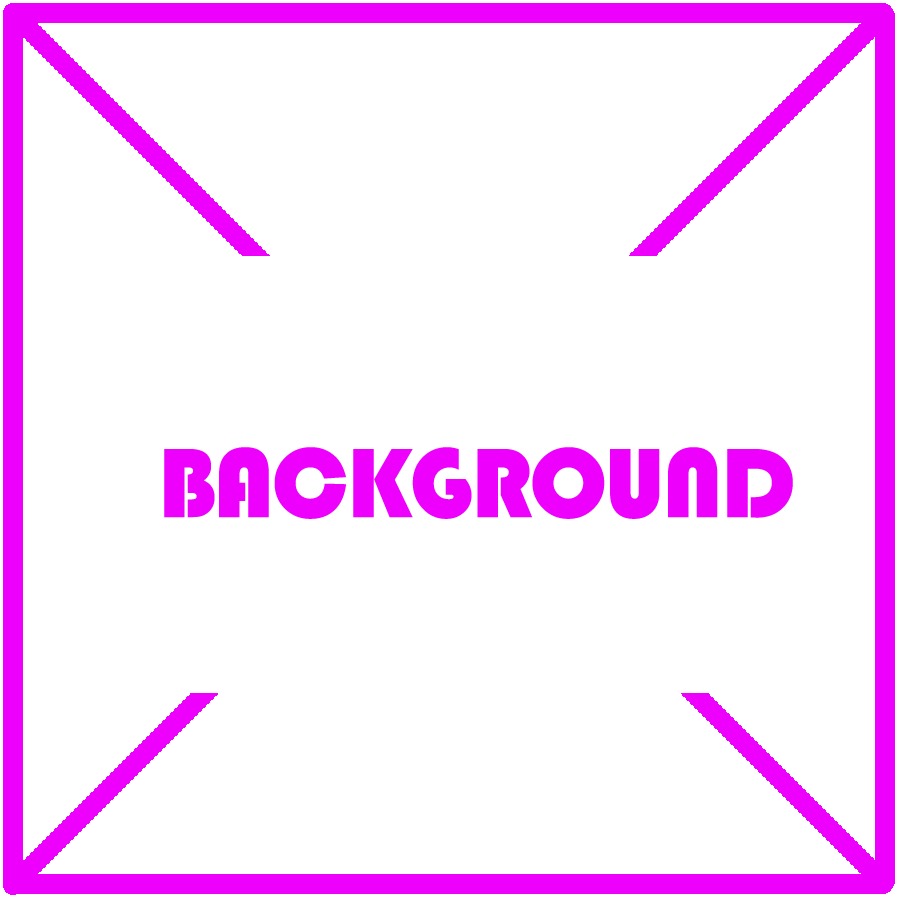
<style>
.page{position:relative;width:900px;height:900px;background:#ffffff}
.page>*{position:absolute;margin:0}
.t1{font:102px "Bauhaus93";letter-spacing:-0.02em;color:#ed00fc}
</style>
<div class="page">
<p class="t1" style="left:164px;top:447px;width:629px;height:72px">BACKGROUND</p>
</div>
